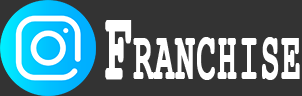
<style>
.page{position:relative;width:302px;height:96px;background:#333333}
.page>*{position:absolute;margin:0}
.t1{font:100.1px "CourierNewPS-BoldMT";letter-spacing:0.025em;color:#ffffff;font-variant:small-caps;font-weight:bold;scale:0.46 1}
</style>
<div class="page">
<p class="t1" style="left:105px;top:20px;width:195px;height:60px">Franchise</p>
</div>
